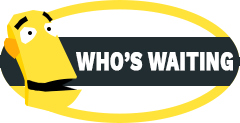
<style>
.page{position:relative;width:240px;height:123px;background:#ffffff}
.page>*{position:absolute;margin:0}
.t1{font:28px "WorkSans-ExtraBold";color:#ffffff;font-weight:bold;scale:0.67 1}
</style>
<div class="page">
<p class="t1" style="left:76px;top:52px;width:157px;height:19px">WHO’S WAITING</p>
</div>
